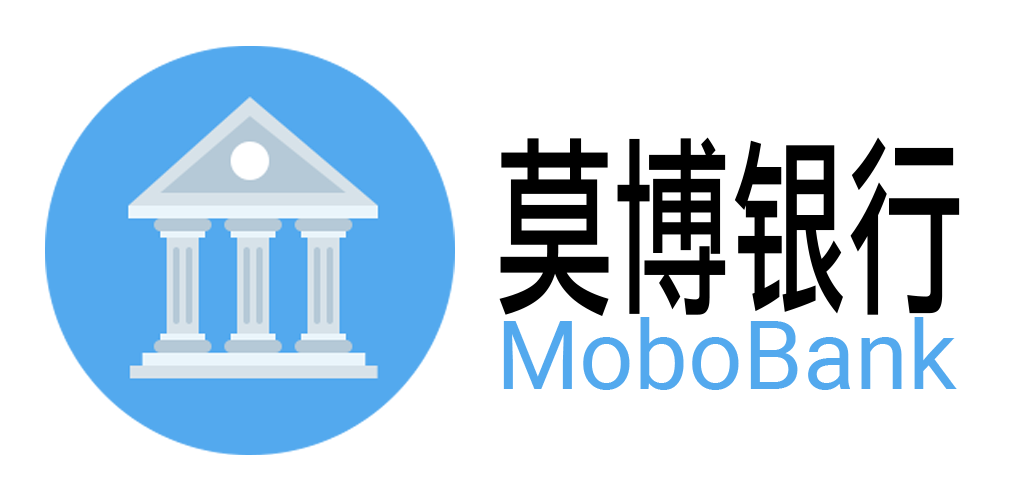
<style>
.page{position:relative;width:1024px;height:500px;background:#ffffff}
.page>*{position:absolute;margin:0}
.t1{font:192px "LiHeiPro";color:#000000;scale:0.61 1}
.t2{font:96px "Roboto-Regular";color:#53a9ee}
</style>
<div class="page">
<p class="t1" style="left:499px;top:137px;width:461px;height:179px">莫博银行</p>
<p class="t2" style="left:503px;top:317px;width:454px;height:73px">MoboBank</p>
</div>
